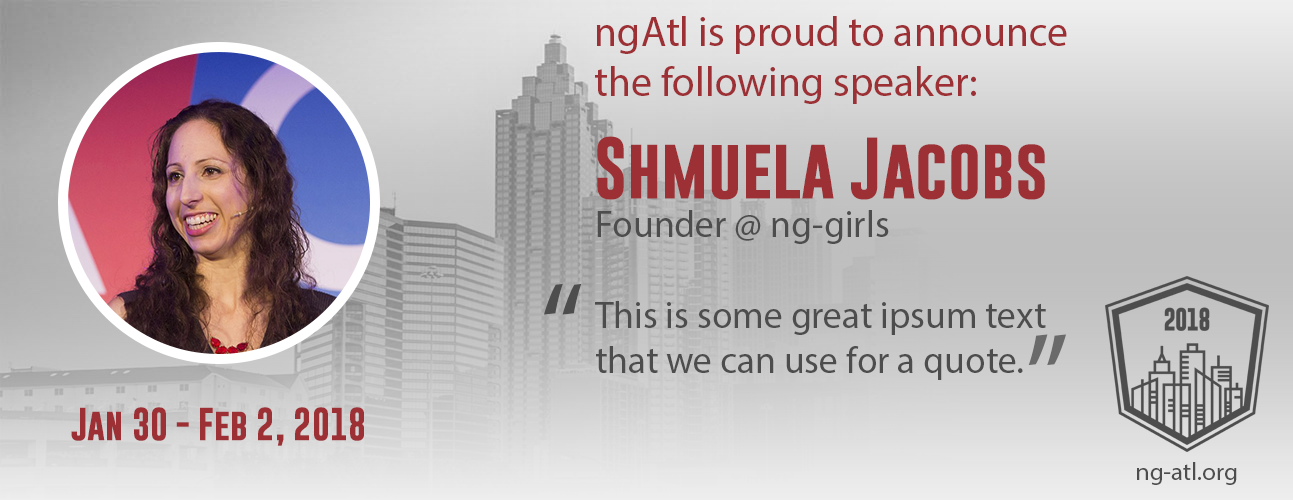
<style>
.page{position:relative;width:1293px;height:500px}
.page>*{position:absolute;margin:0}
.t1{font:41.7px "MyriadPro-Regular";color:#9d3035}
.t2{font:62.5px "GoboldBold";color:#9d3035}
.t3{font:37.5px "MyriadPro-Regular";color:#4d4d4e}
.t4{font:125px "MyriadPro-Regular";color:#4d4d4e}
.t5{font:125px "MyriadPro-Regular";color:#6a6a6b}
.t6{font:33.3px "GoboldBold";color:#9d3035}
.t7{font:25px "MyriadPro-Regular";color:#4d4d4e}
</style>
<div class="page">
<p class="t1" style="left:595px;top:16px;width:472px;height:88px">ngAtl is proud to announce the following speaker:</p>
<p class="t2" style="left:597px;top:136px;width:448px;height:64px">Shmuela Jacobs</p>
<p class="t3" style="left:597px;top:210px;width:292px;height:34px">Founder @ ng-girls</p>
<p class="t4" style="left:544px;top:283px;width:38px;height:32px">“</p>
<p class="t3" style="left:595px;top:301px;width:451px;height:79px">This is some great ipsum text that we can use for a quote.</p>
<p class="t5" style="left:1028px;top:334px;width:38px;height:32px;rotate:180deg">“</p>
<p class="t6" style="left:71px;top:407px;width:293px;height:39px">Jan 30 - Feb 2, 2018</p>
<p class="t7" style="left:1137px;top:462px;width:100px;height:23px">ng-atl.org</p>
</div>
